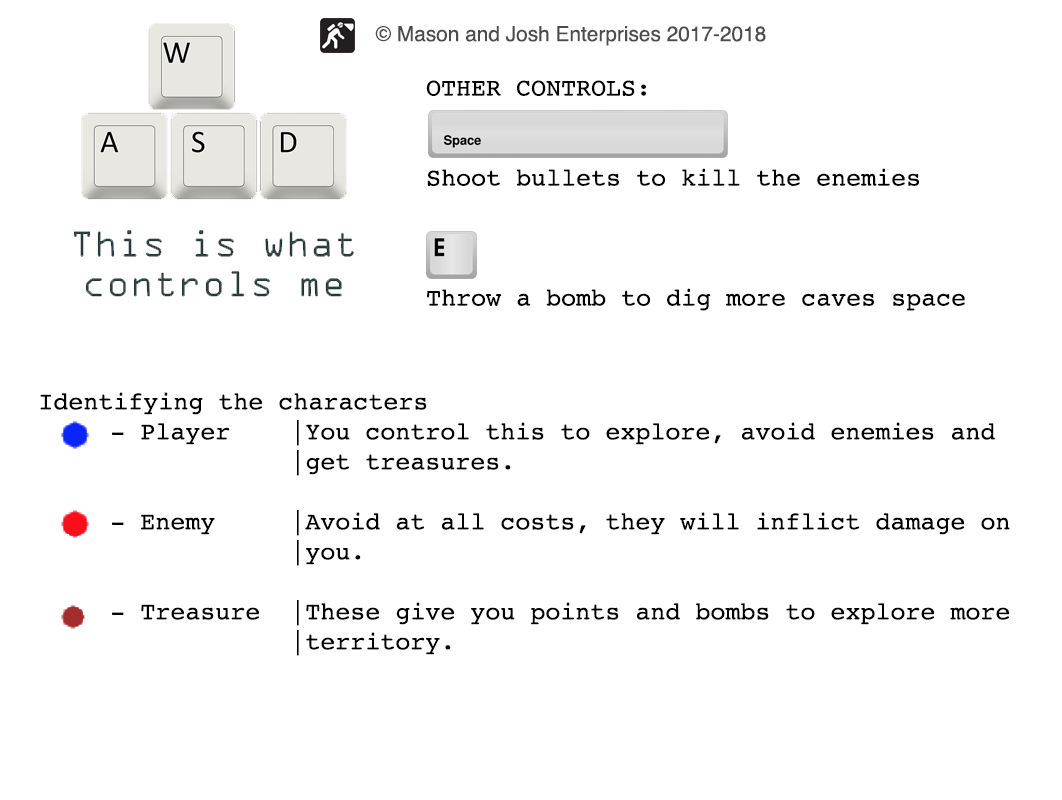
<style>
.page{position:relative;width:1062px;height:800px;background:#ffffff}
.page>*{position:absolute;margin:0}
.t1{font:25px "Courier";color:#000000}
</style>
<div class="page">
<p class="t1" style="left:426px;top:80px;width:539px;height:231px">OTHER CONTROLS: <br><br><br>Shoot bullets to kill the enemies<br><br><br><br>Throw a bomb to dig more caves space</p>
<p class="t1" style="left:40px;top:392px;width:970px;height:264px">Identifying the characters<br>  - Player  |You control this to explore, avoid enemies and<br>       |get treasures.<br><br>  - Enemy   |Avoid at all costs, they will inflict damage on<br>       |you.<br><br>  - Treasure |These give you points and bombs to explore more<br>       |territory.</p>
</div>
